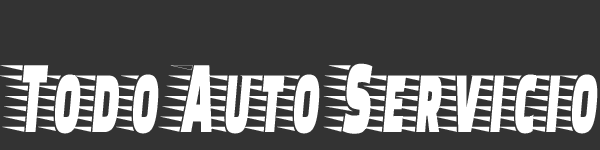
<style>
.page{position:relative;width:600px;height:150px;background:#333333}
.page>*{position:absolute;margin:0}
.t1{font:106.4px "FasterOne-Regular";color:#ffffff;scale:0.48 1}
</style>
<div class="page">
<p class="t1" style="left:0px;top:63px;width:598px;height:71px">Todo Auto Servicio</p>
</div>
